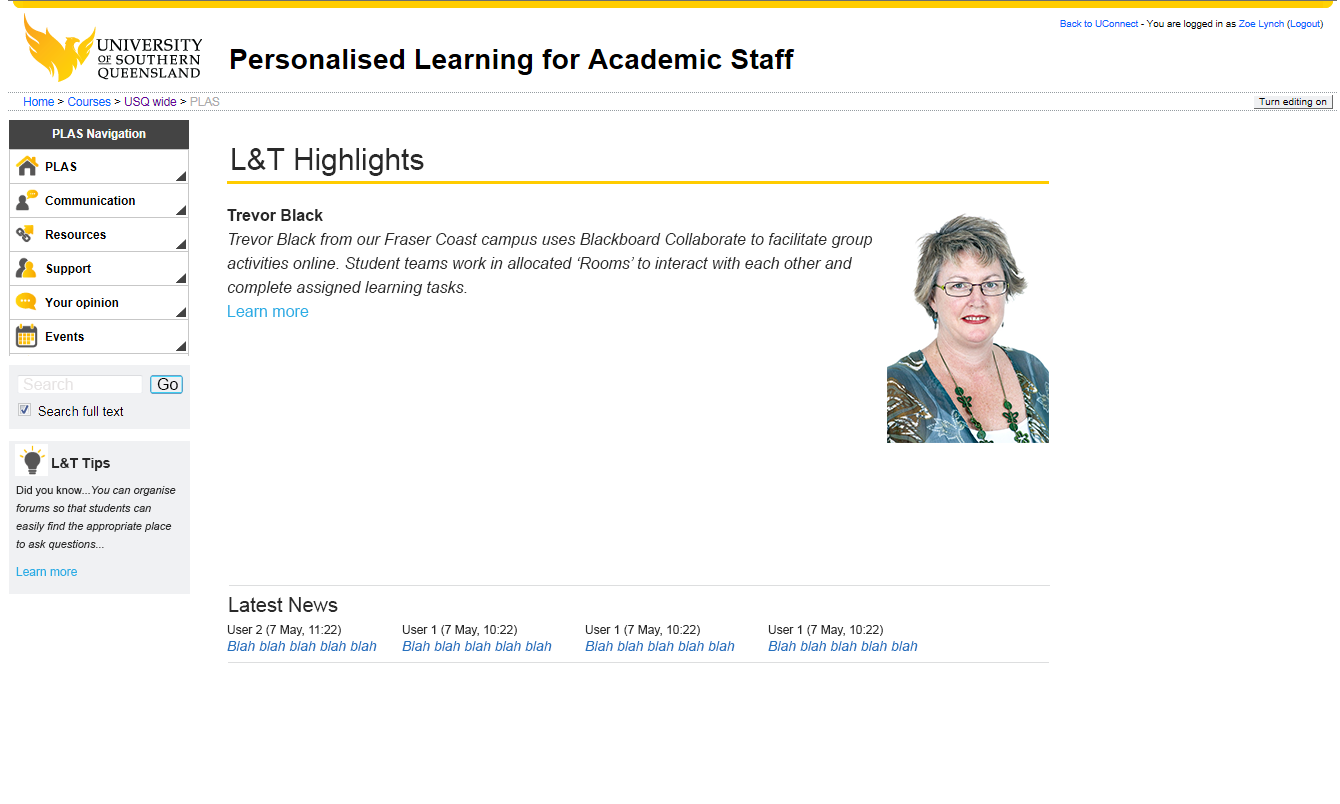
<style>
.page{position:relative;width:1340px;height:804px;background:#ffffff}
.page>*{position:absolute;margin:0}
.t1{font:30px "ArialMT";color:#292929}
.t2{font:16px/24px "Arial-ItalicMT";color:#292929}
.t3{font:16px/24px "Arial-BoldMT";color:#292929}
.t4{font:16px/24px "ArialMT";color:#2aaee5}
.t5{font:16px "ArialMT";color:#e6e3e3}
.t6{font:16px "ArialMT";color:#000000}
.t7{font:11px/24px "Arial-ItalicMT";color:#292929}
.t8{font:18px/24px "ArialMT";color:#292929}
.t9{font:14px/24px "Arial-BoldMT";color:#292929}
.t10{font:11px/24px "ArialMT";color:#292929}
.t11{font:12px/24px "ArialMT";color:#2aaee5}
.t12{font:20px "ArialMT";color:#292929}
.t13{font:14px "Arial-ItalicMT";color:#2672bf}
.t14{font:12px "ArialMT";color:#292929}
</style>
<div class="page">
<p class="t1" style="left:232px;top:148px;width:192px;height:28px">L&amp;T Highlights</p>
<p class="t2" style="left:227px;top:209px;width:646px;height:108px"><span class="t3">Trevor Black<br></span>Trevor Black from our Fraser Coast campus uses Blackboard Collaborate to facilitate group<br>activities online. Student teams work in allocated ‘Rooms’ to interact with each other and<br>complete assigned learning tasks.<br><span class="t4">Learn more</span></p>
<p class="t5" style="left:23px;top:378px;width:50px;height:12px">Search</p>
<p class="t6" style="left:157px;top:378px;width:21px;height:12px">Go</p>
<p class="t7" style="left:16px;top:458px;width:160px;height:118px"><span class="t8">       </span><span class="t9">L&amp;T Tips<br></span><span class="t10">Did you know...</span>You can organise<br>forums so that students can<br>easily find the appropriate place<br>to ask questions...<br><span class="t11">Learn more</span></p>
<p class="t12" style="left:229px;top:597px;width:109px;height:15px">Latest News</p>
<p class="t13" style="left:227px;top:625px;width:150px;height:26px"><span class="t14">User 2 (7 May, 11:22)<br></span>Blah blah blah blah blah</p>
<p class="t13" style="left:402px;top:625px;width:150px;height:26px"><span class="t14">User 1 (7 May, 10:22)<br></span>Blah blah blah blah blah</p>
<p class="t13" style="left:585px;top:625px;width:150px;height:26px"><span class="t14">User 1 (7 May, 10:22)<br></span>Blah blah blah blah blah</p>
<p class="t13" style="left:768px;top:625px;width:150px;height:26px"><span class="t14">User 1 (7 May, 10:22)<br></span>Blah blah blah blah blah</p>
</div>
